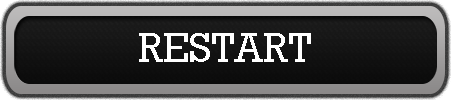
<style>
.page{position:relative;width:451px;height:100px}
.page>*{position:absolute;margin:0}
.t1{font:41.7px "Rockwell";color:#ffffff}
</style>
<div class="page">
<p class="t1" style="left:139px;top:33px;width:172px;height:29px">RESTART</p>
</div>
